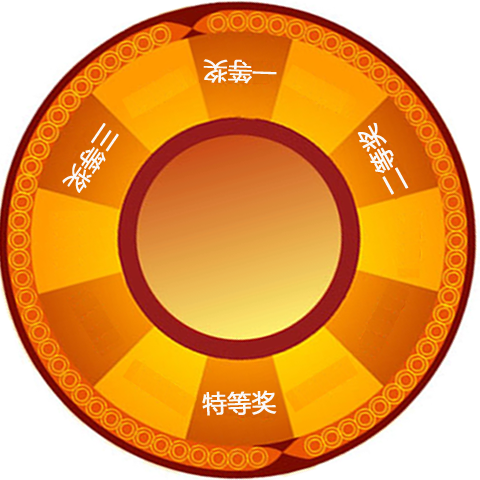
<style>
.page{position:relative;width:480px;height:480px}
.page>*{position:absolute;margin:0}
.t1{font:24px "MicrosoftYaHei";color:#f9f8f8;font-weight:bold}
</style>
<div class="page">
<p class="t1" style="left:203px;top:59px;width:74px;height:25px;rotate:-178deg">一等奖</p>
<p class="t1" style="left:62px;top:123px;width:57px;height:70px;rotate:124deg">三等奖</p>
<p class="t1" style="left:357px;top:122px;width:52px;height:73px;rotate:-119deg">二等奖</p>
<p class="t1" style="left:202px;top:390px;width:75px;height:26px;rotate:-2deg">特等奖</p>
</div>
